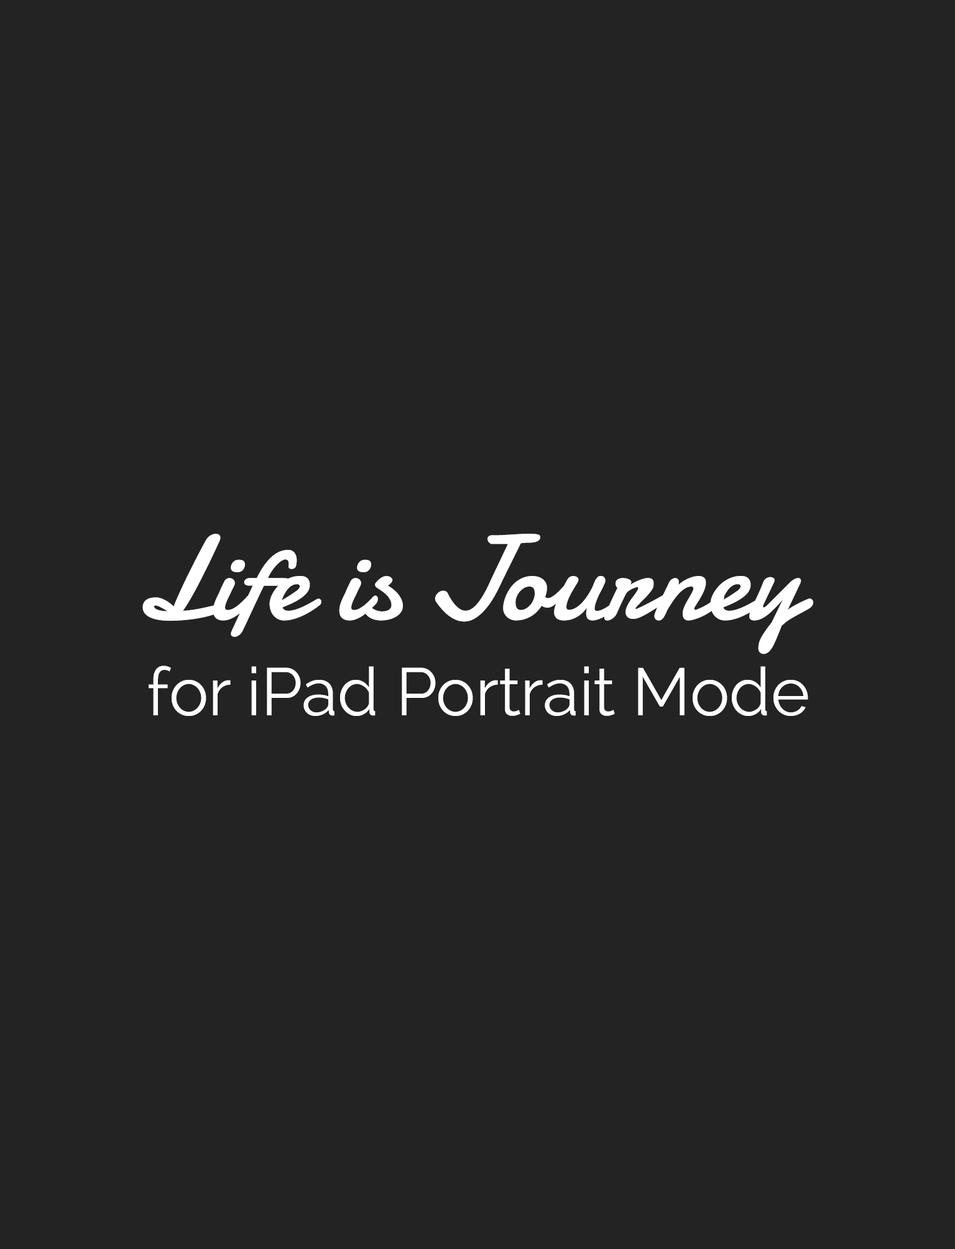
<style>
.page{position:relative;width:955px;height:1249px;background:#232323}
.page>*{position:absolute;margin:0}
.t1{font:120.7px "Damion";color:#ffffff}
.t2{font:66.8px "Raleway-Regular";color:#ffffff}
</style>
<div class="page">
<p class="t1" style="left:142px;top:533px;width:671px;height:121px">Life is Journey</p>
<p class="t2" style="left:149px;top:665px;width:659px;height:51px">for iPad Portrait Mode</p>
</div>
